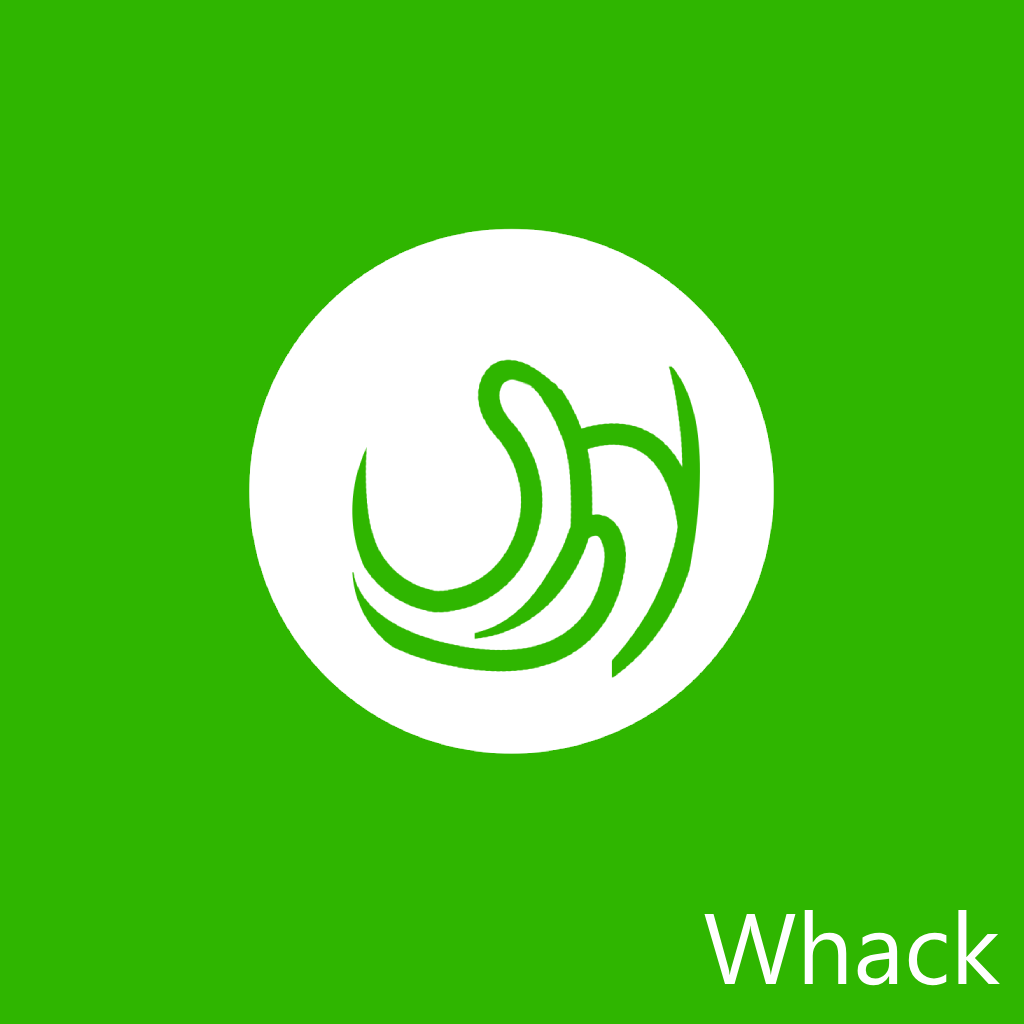
<style>
.page{position:relative;width:1024px;height:1024px;background:#2fb600}
.page>*{position:absolute;margin:0}
.t1{font:100px "SegoeUI";color:#ffffff}
</style>
<div class="page">
<p class="t1" style="left:704px;top:909px;width:296px;height:77px">Whack</p>
</div>
